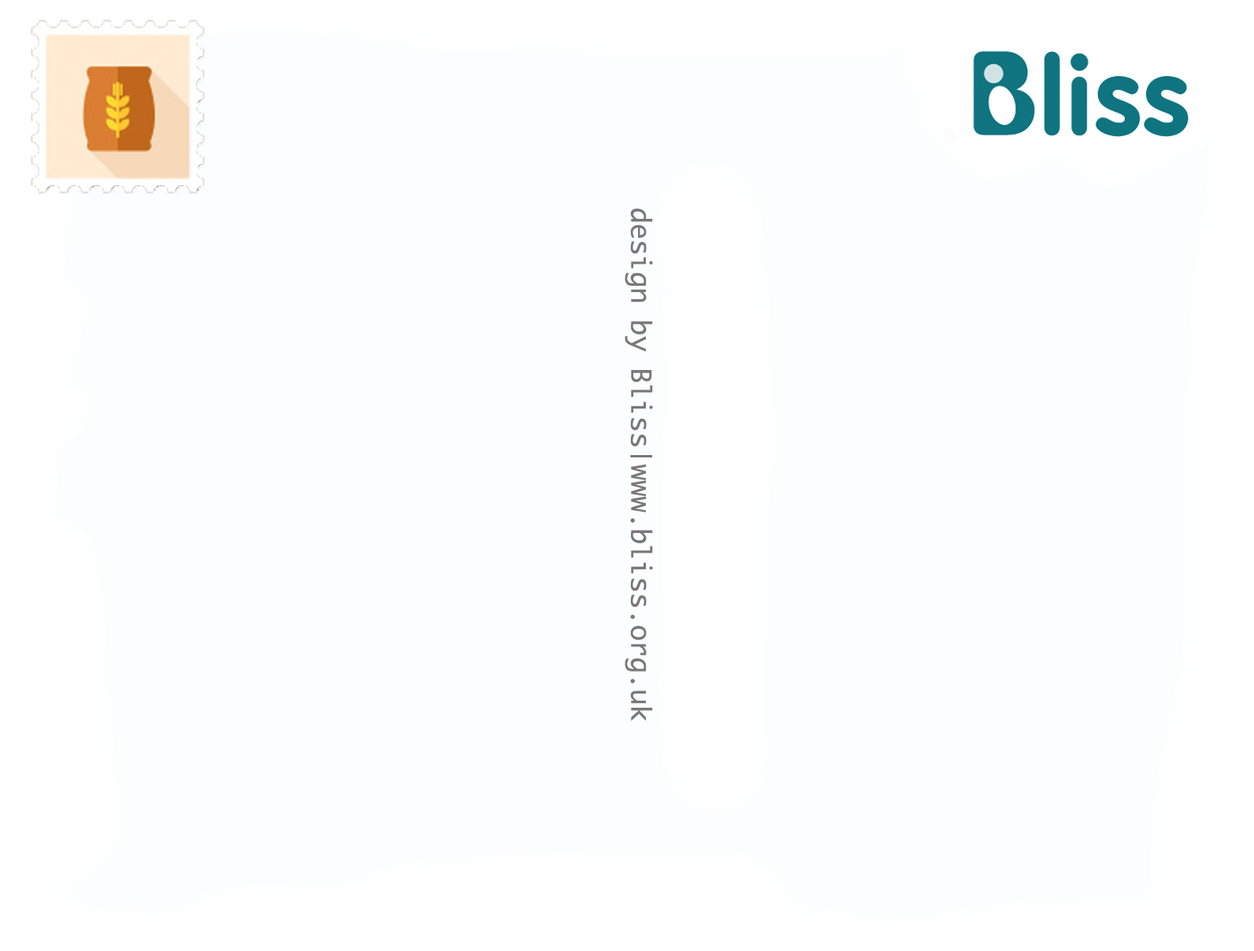
<style>
.page{position:relative;width:1254px;height:951px;background:#fcfdfe}
.page>*{position:absolute;margin:0}
.t1{font:26.8px "Monaco";color:#7a7777}
</style>
<div class="page">
<p class="t1" style="left:624px;top:209px;width:29px;height:512px;rotate:90deg">design by Bliss|www.bliss.org.uk</p>
</div>
